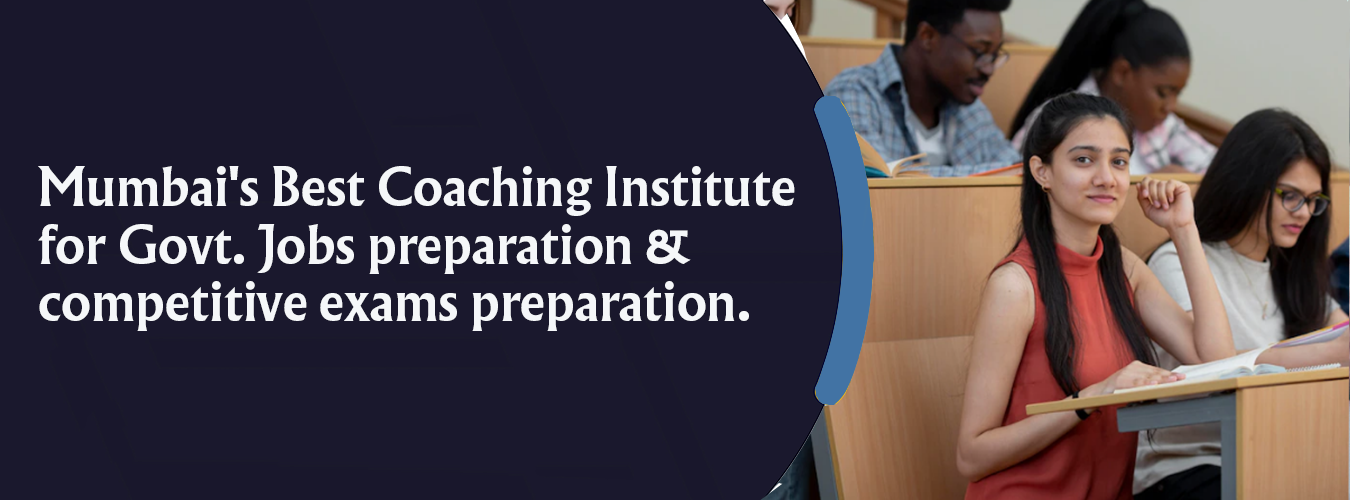
<style>
.page{position:relative;width:1350px;height:500px;background:#1a182d}
.page>*{position:absolute;margin:0}
.t1{font:48px "AlbertusNova-Bold";color:#f5f7f9}
</style>
<div class="page">
<p class="t1" style="left:38px;top:166px;width:757px;height:165px">Mumbai's Best Coaching Institute for Govt. Jobs preparation &amp; competitive exams preparation.</p>
</div>
